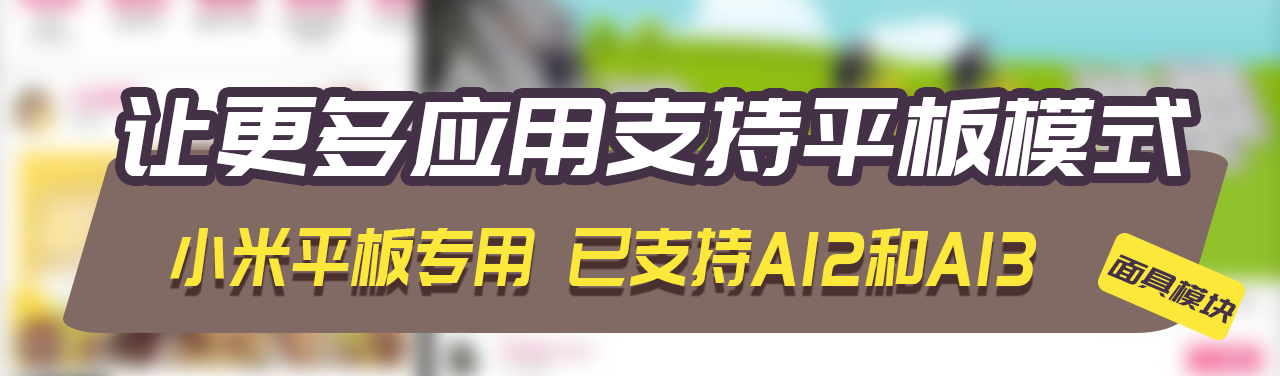
<style>
.page{position:relative;width:1280px;height:376px;background:#816964}
.page>*{position:absolute;margin:0}
.t1{font:108.8px "PangMenZhengDao";letter-spacing:0.05em;color:#ffffff;font-style:italic;scale:0.92 1}
.t2{font:81.3px "PangMenZhengDao";letter-spacing:0.05em;color:#fbe83a;font-style:italic;scale:0.77 1}
.t3{font:33.1px "PangMenZhengDao";letter-spacing:0.05em;color:#443147;font-style:italic}
</style>
<div class="page">
<p class="t1" style="left:124px;top:97px;width:1068px;height:79px">让更多应用支持平板模式</p>
<p class="t2" style="left:170px;top:228px;width:867px;height:58px">小米平板专用 已支持A12和A13</p>
<p class="t3" style="left:1107px;top:254px;width:129px;height:70px;rotate:23deg">面具模块</p>
</div>
